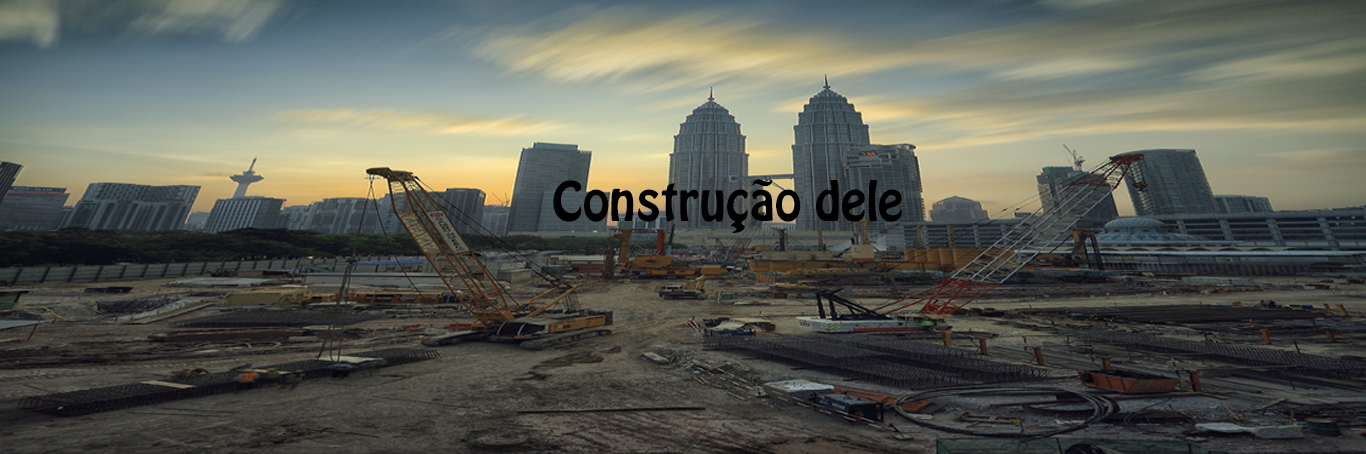
<style>
.page{position:relative;width:1366px;height:454px}
.page>*{position:absolute;margin:0}
.t1{font:48px "HoboStd";color:#000000}
</style>
<div class="page">
<p class="t1" style="left:553px;top:179px;width:349px;height:54px">Construção dele</p>
</div>
